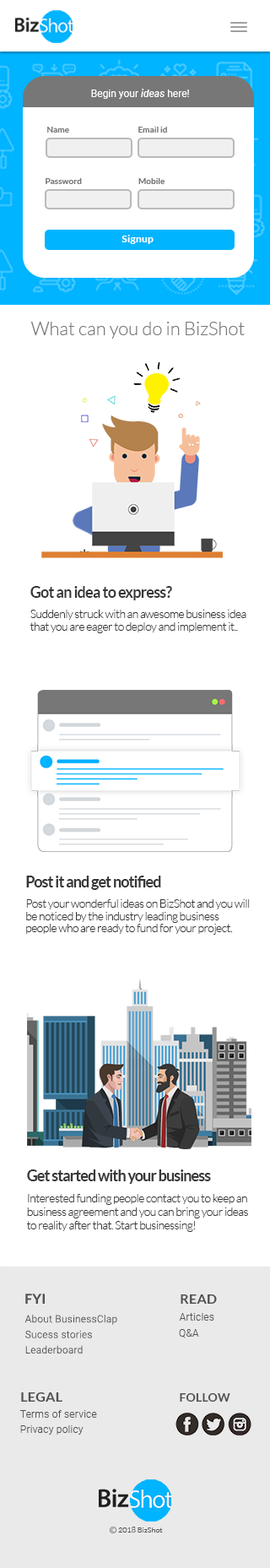
<style>
.page{position:relative;width:270px;height:1568px;background:#ffffff}
.page>*{position:absolute;margin:0}
.t1{font:10.1px "Roboto-Regular";color:#ffffff}
.t2{font:10.1px "Roboto-MediumItalic";color:#ffffff}
.t3{font:8.4px "Lato-Bold";color:#777777}
.t4{font:10.1px "Lato-Bold";letter-spacing:0.02em;color:#ffffff}
.t5{font:18.6px "Lato-Light";color:#777777}
.t6{font:15.2px "Lato-Bold";letter-spacing:-0.04em;color:#363636}
.t7{font:11.8px/12.2px "Lato-Light";letter-spacing:-0.04em;color:#363636}
.t8{font:14.9px "Lato-Bold";letter-spacing:-0.04em;color:#363636}
.t9{font:11.8px/13.8px "Lato-Light";letter-spacing:-0.04em;color:#363636}
.t10{font:13.5px "Lato-Bold";letter-spacing:0.02em;color:#515151}
.t11{font:10.1px "Roboto-Light";letter-spacing:0.02em;color:#515151}
.t12{font:11.8px "Lato-Bold";letter-spacing:0.02em;color:#515151}
.t13{font:7.3px "Lato-Light";letter-spacing:0.02em;color:#515151}
</style>
<div class="page">
<p class="t1" style="left:91px;top:89px;width:98px;height:10px">Begin your <span class="t2">ideas</span> here!</p>
<p class="t3" style="left:47px;top:127px;width:22px;height:6px">Name</p>
<p class="t3" style="left:138px;top:127px;width:29px;height:6px">Email id</p>
<p class="t3" style="left:46px;top:178px;width:36px;height:6px">Password</p>
<p class="t3" style="left:138px;top:178px;width:27px;height:6px">Mobile</p>
<p class="t4" style="left:122px;top:235px;width:32px;height:9px">Signup</p>
<p class="t5" style="left:30px;top:322px;width:215px;height:17px">What can you do in BizShot</p>
<p class="t6" style="left:30px;top:586px;width:142px;height:14px">Got an idea to express?</p>
<p class="t7" style="left:30px;top:610px;width:217px;height:23px">Suddenly struck with an awesome business idea that you are eager to deploy and implement it..</p>
<p class="t8" style="left:26px;top:876px;width:135px;height:14px">Post it and get notified</p>
<p class="t7" style="left:26px;top:899px;width:224px;height:36px">Post your wonderful ideas on BizShot and you will be noticed by the industry leading business people who are ready to fund for your project.</p>
<p class="t8" style="left:27px;top:1169px;width:184px;height:15px">Get started with your business</p>
<p class="t9" style="left:27px;top:1194px;width:221px;height:38px">Interested funding people contact you to keep an business agreement and you can bring your ideas to reality after that. Start businessing!</p>
<p class="t10" style="left:25px;top:1294px;width:20px;height:10px">FYI</p>
<p class="t10" style="left:181px;top:1294px;width:36px;height:10px">READ</p>
<p class="t11" style="left:179px;top:1313px;width:35px;height:8px">Articles</p>
<p class="t11" style="left:24px;top:1315px;width:93px;height:10px">About BusinessClap</p>
<p class="t11" style="left:25px;top:1330px;width:67px;height:8px">Sucess stories</p>
<p class="t11" style="left:179px;top:1329px;width:20px;height:9px">Q&amp;A</p>
<p class="t11" style="left:25px;top:1345px;width:58px;height:9px">Leaderboard</p>
<p class="t10" style="left:21px;top:1392px;width:41px;height:10px">LEGAL</p>
<p class="t12" style="left:180px;top:1393px;width:51px;height:9px">FOLLOW</p>
<p class="t11" style="left:19px;top:1410px;width:78px;height:8px">Terms of service</p>
<p class="t11" style="left:20px;top:1425px;width:64px;height:10px">Privacy policy</p>
<p class="t13" style="left:118px;top:1527px;width:45px;height:6px">2018 BizShot</p>
</div>
